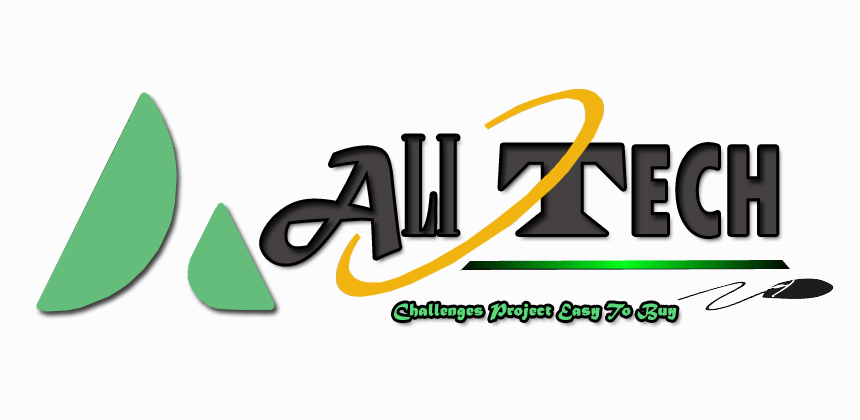
<style>
.page{position:relative;width:860px;height:420px;background:#fdfcfc}
.page>*{position:absolute;margin:0}
.t1{font:131.8px "TwCenMT-CondensedExtraBold";color:#444140;font-weight:bold;scale:0.8 1}
.t2{font:131.8px "MaturaMTScriptCapitals";color:#444140;font-weight:bold;scale:0.8 1}
.t3{font:131.8px "Onyx";color:#444140;font-weight:bold;scale:0.8 1}
.t4{font:131.8px "LatinWide";color:#444140;font-weight:bold;scale:0.8 1}
.t5{font:18px "MaturaMTScriptCapitals";color:#5bd879;font-weight:bold}
</style>
<div class="page">
<p class="t1" style="left:262px;top:136px;width:515px;height:128px"><span class="t2">A</span><span class="t3">LI </span><span class="t4">T</span>ECH</p>
<p class="t5" style="left:394px;top:303px;width:283px;height:18px">Challenges Project Easy To Buy</p>
</div>
